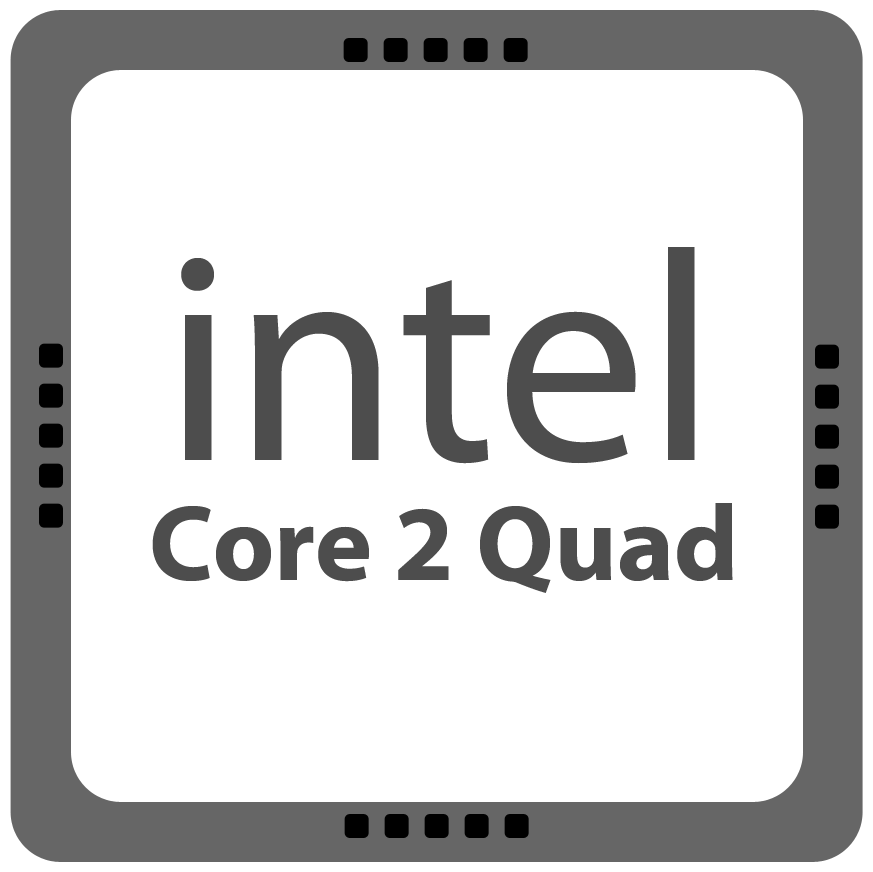
<style>
.page{position:relative;width:873px;height:872px;background:#ffffff}
.page>*{position:absolute;margin:0}
.t1{font:300px "MyriadPro-Regular";color:#4d4d4d}
.t2{font:108.3px "MyriadPro-Bold";color:#4d4d4d}
</style>
<div class="page">
<p class="t1" style="left:181px;top:247px;width:514px;height:217px">intel</p>
<p class="t2" style="left:152px;top:503px;width:581px;height:90px">Core 2 Quad</p>
</div>
